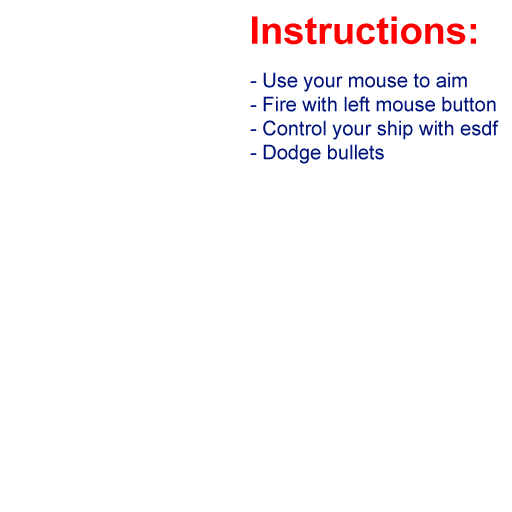
<style>
.page{position:relative;width:512px;height:512px;background:#ffffff}
.page>*{position:absolute;margin:0}
.t1{font:38px "Arial-BoldMT";color:#fe0000}
.t2{font:20px "ArialMT";color:#00147b}
</style>
<div class="page">
<p class="t1" style="left:252px;top:16px;width:224px;height:29px">Instructions:</p>
<p class="t2" style="left:250px;top:72px;width:249px;height:92px">- Use your mouse to aim<br>- Fire with left mouse button<br>- Control your ship with esdf<br>- Dodge bullets</p>
</div>
